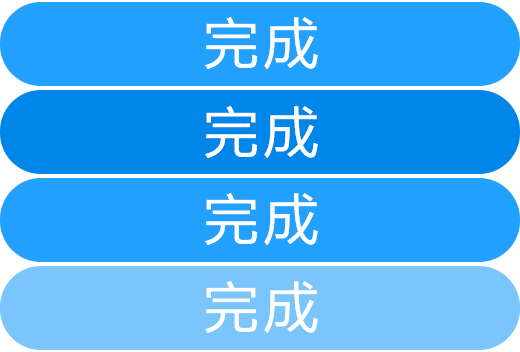
<style>
.page{position:relative;width:520px;height:352px;background:#21a0ff}
.page>*{position:absolute;margin:0}
.t1{font:54px "MicrosoftYaHei";letter-spacing:0.12em;color:#ffffff}
</style>
<div class="page">
<p class="t1" style="left:205px;top:17px;width:113px;height:53px">完成</p>
<p class="t1" style="left:205px;top:106px;width:113px;height:53px">完成</p>
<p class="t1" style="left:205px;top:193px;width:113px;height:53px">完成</p>
<p class="t1" style="left:205px;top:281px;width:113px;height:53px">完成</p>
</div>
